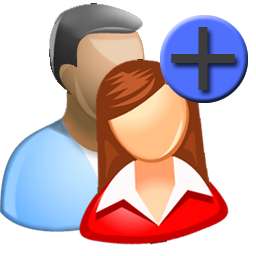
<style>
.page{position:relative;width:256px;height:256px;background:#ffffff}
.page>*{position:absolute;margin:0}
.t1{font:110px "Tahoma";color:#3d3d3d}
</style>
<div class="page">
<p class="t1" style="left:171px;top:27px;width:64px;height:63px">+</p>
</div>
